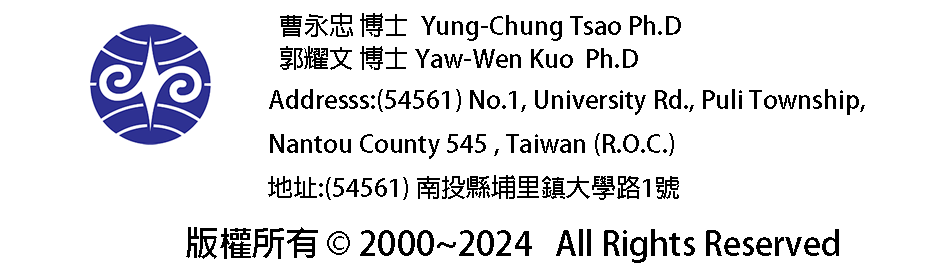
<style>
.page{position:relative;width:942px;height:276px;background:#ffffff}
.page>*{position:absolute;margin:0}
.t1{font:25px/33.3px "AdobeFanHeitiStd-Bold";color:#000000}
.t2{font:25px "AdobeFanHeitiStd-Bold";color:#000000}
.t3{font:33.3px "AdobeFanHeitiStd-Bold";color:#000000}
</style>
<div class="page">
<p class="t1" style="left:280px;top:13px;width:401px;height:57px">曹永忠 博士  Yung-Chung Tsao Ph.D<br><span class="t2">郭耀文 博士 Yaw-Wen Kuo  Ph.D</span></p>
<p class="t2" style="left:268px;top:89px;width:597px;height:111px">Addresss:(54561) No.1, University Rd., Puli Township, <br>Nantou County 545 , Taiwan (R.O.C.) <br>地址:(54561) 南投縣埔里鎮大學路1號</p>
<p class="t3" style="left:186px;top:227px;width:653px;height:36px">版權所有 © 2000~2024   All Rights Reserved</p>
</div>
